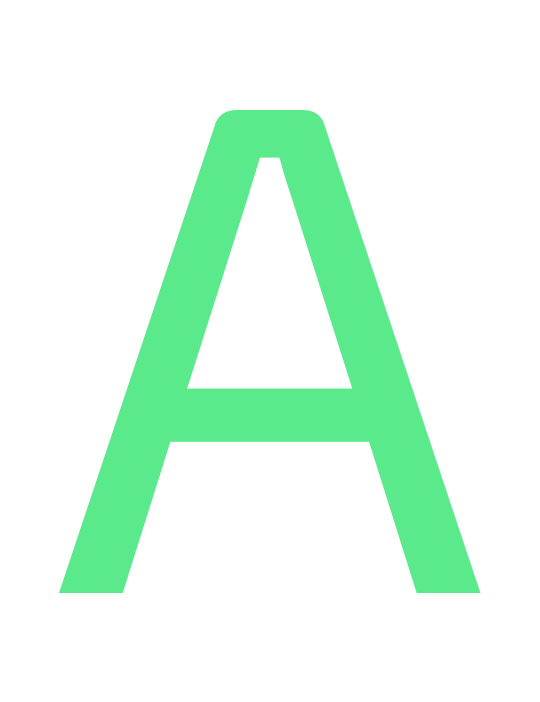
<style>
.page{position:relative;width:540px;height:702px;background:#ffffff}
.page>*{position:absolute;margin:0}
.t1{font:700px "Exo2-Regular";color:#5aea8c}
</style>
<div class="page">
<p class="t1" style="left:59px;top:110px;width:422px;height:483px">A</p>
</div>
